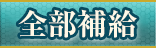
<style>
.page{position:relative;width:156px;height:48px;background:#084b5f}
.page>*{position:absolute;margin:0}
.t1{font:30px "RyuminPr6N-ExBold";color:#fff8e7}
</style>
<div class="page">
<p class="t1" style="left:18px;top:9px;width:119px;height:29px">全部補給</p>
</div>
